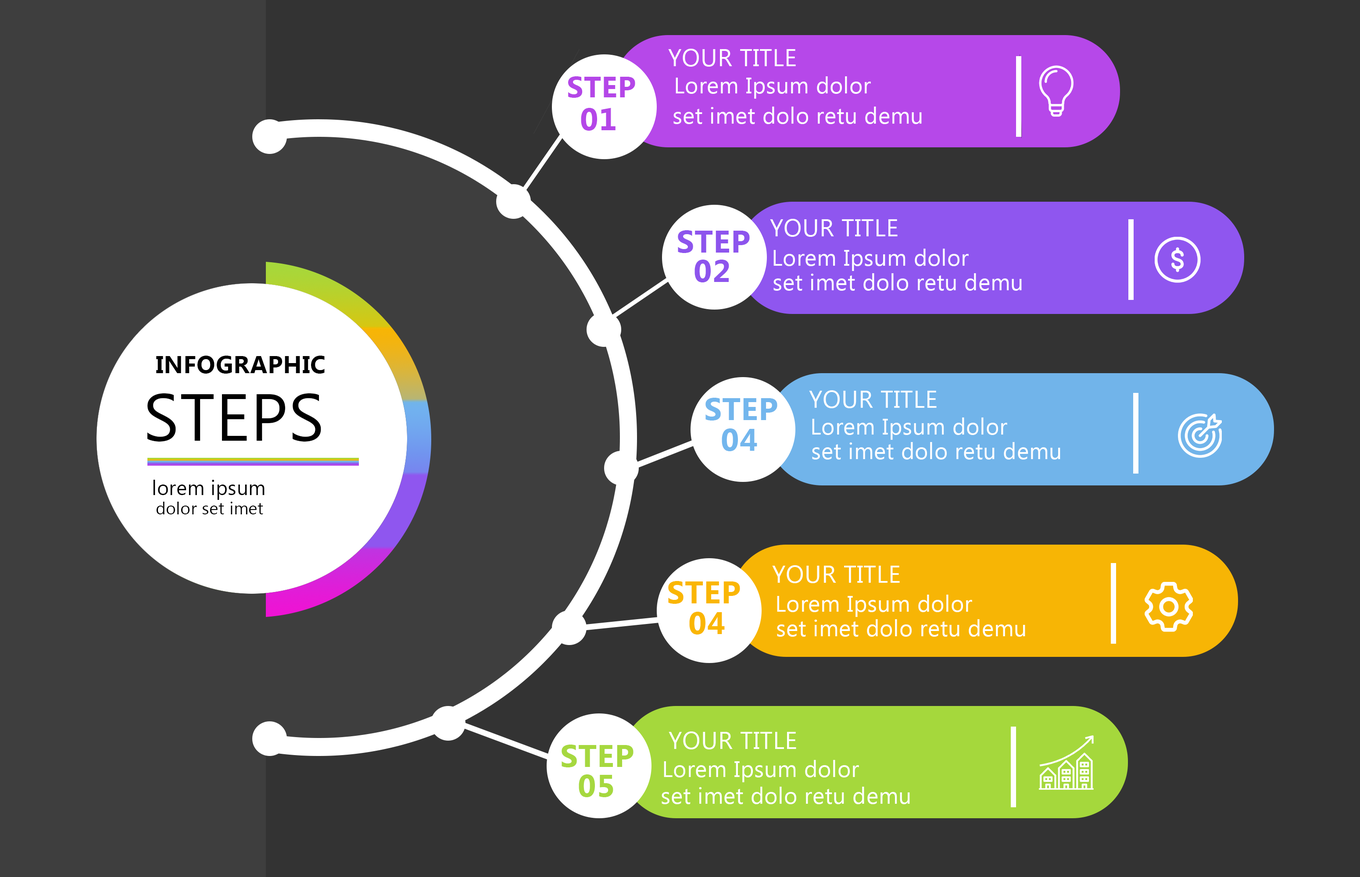
<style>
.page{position:relative;width:1360px;height:877px;background:#333333}
.page>*{position:absolute;margin:0}
.t1{font:24.3px "MicrosoftTaiLe";letter-spacing:0.015em;color:#ffffff}
.t2{font:29.5px "MicrosoftTaiLe-Bold";letter-spacing:0.015em;color:#b446e8}
.t3{font:22.8px "MicrosoftTaiLe";letter-spacing:0.015em;color:#ffffff}
.t4{font:31.6px "MicrosoftTaiLe-Bold";letter-spacing:0.015em;color:#b446e8}
.t5{font:31.6px "MicrosoftTaiLe-Bold";letter-spacing:0.015em;color:#8d54ed}
.t6{font:24.5px "MicrosoftTaiLe-Bold";letter-spacing:0.015em;color:#000000}
.t7{font:66.5px "MicrosoftTaiLe";letter-spacing:0.015em;color:#000000}
.t8{font:31.6px "MicrosoftTaiLe-Bold";letter-spacing:0.015em;color:#73b6ed}
.t9{font:20.1px "MicrosoftTaiLe";letter-spacing:0.015em;color:#000000}
.t10{font:17px "MicrosoftTaiLe";letter-spacing:0.015em;color:#000000}
.t11{font:31.6px "MicrosoftTaiLe-Bold";letter-spacing:0.015em;color:#fab603}
.t12{font:31.6px "MicrosoftTaiLe-Bold";letter-spacing:0.015em;color:#a6d83f}
</style>
<div class="page">
<p class="t1" style="left:668px;top:49px;width:128px;height:18px">YOUR TITLE</p>
<p class="t2" style="left:568px;top:76px;width:67px;height:22px">STEP</p>
<p class="t3" style="left:675px;top:76px;width:196px;height:23px">Lorem Ipsum dolor</p>
<p class="t4" style="left:581px;top:108px;width:34px;height:23px">01</p>
<p class="t3" style="left:673px;top:107px;width:248px;height:17px">set imet dolo retu demu</p>
<p class="t1" style="left:770px;top:219px;width:127px;height:18px">YOUR TITLE</p>
<p class="t5" style="left:678px;top:230px;width:71px;height:23px">STEP</p>
<p class="t3" style="left:773px;top:249px;width:195px;height:22px">Lorem Ipsum dolor</p>
<p class="t5" style="left:694px;top:260px;width:35px;height:22px">02</p>
<p class="t3" style="left:773px;top:273px;width:248px;height:18px">set imet dolo retu demu</p>
<p class="t6" style="left:156px;top:356px;width:169px;height:18px">INFOGRAPHIC</p>
<p class="t7" style="left:147px;top:393px;width:174px;height:49px">STEPS</p>
<p class="t8" style="left:705px;top:398px;width:72px;height:23px">STEP</p>
<p class="t1" style="left:809px;top:390px;width:127px;height:18px">YOUR TITLE</p>
<p class="t3" style="left:812px;top:418px;width:195px;height:22px">Lorem Ipsum dolor</p>
<p class="t8" style="left:721px;top:428px;width:36px;height:23px">04</p>
<p class="t3" style="left:812px;top:442px;width:248px;height:18px">set imet dolo retu demu</p>
<p class="t9" style="left:153px;top:480px;width:111px;height:20px">lorem ipsum</p>
<p class="t10" style="left:156px;top:502px;width:107px;height:12px">dolor set imet</p>
<p class="t1" style="left:772px;top:565px;width:127px;height:18px">YOUR TITLE</p>
<p class="t11" style="left:668px;top:581px;width:72px;height:23px">STEP</p>
<p class="t3" style="left:777px;top:595px;width:195px;height:22px">Lorem Ipsum dolor</p>
<p class="t11" style="left:689px;top:612px;width:35px;height:23px">04</p>
<p class="t3" style="left:777px;top:619px;width:248px;height:18px">set imet dolo retu demu</p>
<p class="t1" style="left:668px;top:732px;width:128px;height:17px">YOUR TITLE</p>
<p class="t12" style="left:561px;top:745px;width:72px;height:22px">STEP</p>
<p class="t3" style="left:664px;top:760px;width:195px;height:22px">Lorem Ipsum dolor</p>
<p class="t12" style="left:578px;top:774px;width:35px;height:23px">05</p>
<p class="t3" style="left:661px;top:787px;width:249px;height:17px">set imet dolo retu demu</p>
</div>
